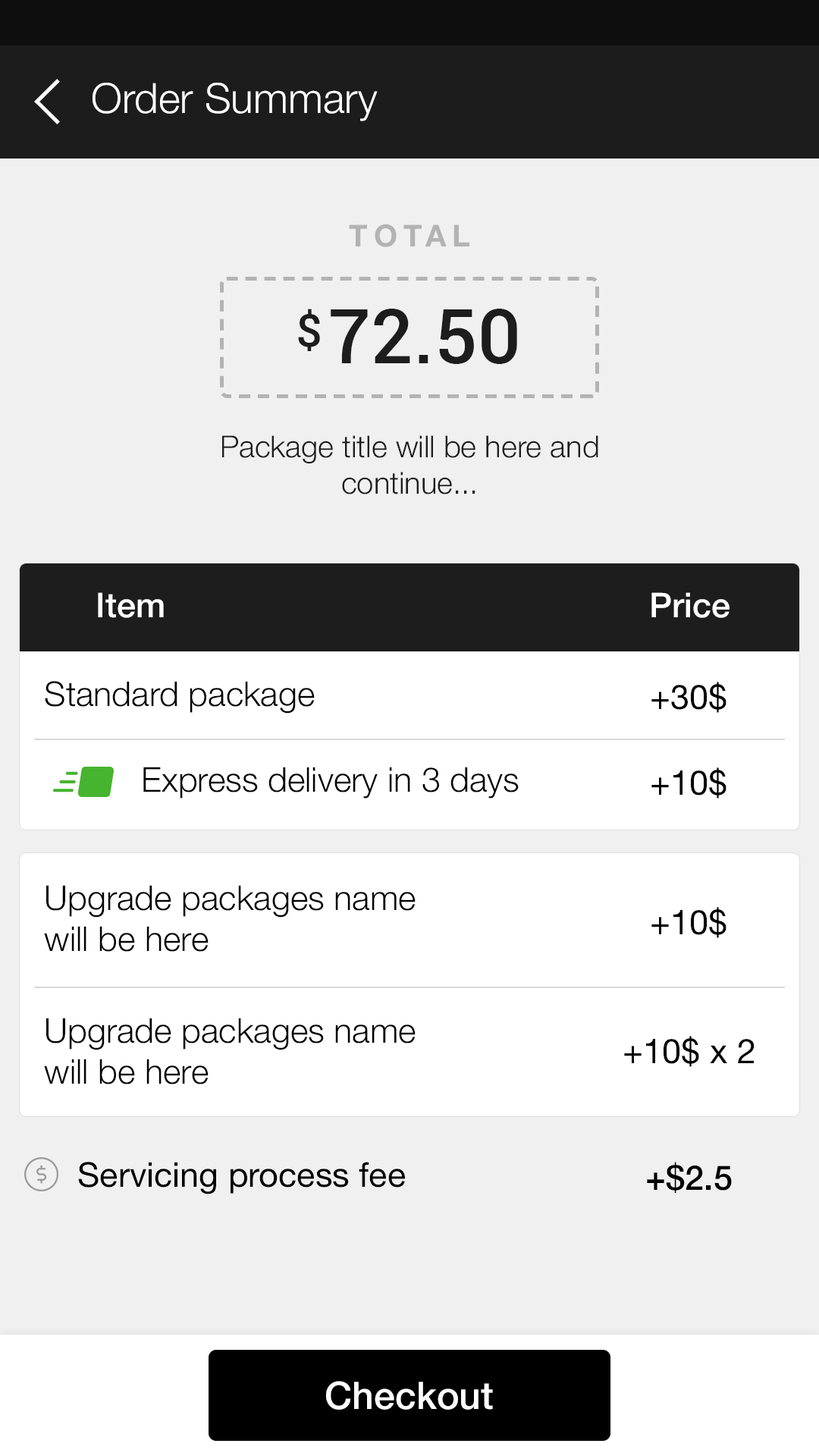
<style>
.page{position:relative;width:819px;height:1456px;background:#f0f0f0}
.page>*{position:absolute;margin:0}
.t1{font:41.7px "HelveticaNeue-Light";color:#ffffff}
.t2{font:30.3px "HelveticaNeue-Bold";letter-spacing:0.2em;color:#b3b3b3}
.t3{font:45.5px "Roboto-Medium";color:#1d1d1d}
.t4{font:75.8px "Roboto-Medium";color:#1d1d1d}
.t5{font:30.3px "HelveticaNeue-Light";color:#1d1d1d}
.t6{font:34.1px "HelveticaNeue-Medium";color:#ffffff}
.t7{font:34.1px "HelveticaNeue-Light";color:#000000}
.t8{font:34.1px "HelveticaNeue";color:#000000}
.t9{font:34.1px "HelveticaNeue-Medium";color:#000000}
.t10{font:37.9px "HelveticaNeue-Medium";color:#ffffff}
</style>
<div class="page">
<p class="t1" style="left:92px;top:83px;width:286px;height:38px">Order Summary</p>
<p class="t2" style="left:349px;top:224px;width:120px;height:23px">TOTAL</p>
<p class="t3" style="left:298px;top:309px;width:22px;height:42px">$</p>
<p class="t4" style="left:331px;top:309px;width:186px;height:55px">72.50</p>
<p class="t5" style="left:222px;top:435px;width:376px;height:59px;text-align:center">Package title will be here and<br>continue...</p>
<p class="t6" style="left:98px;top:592px;width:66px;height:26px">Item</p>
<p class="t6" style="left:651px;top:592px;width:79px;height:26px">Price</p>
<p class="t7" style="left:45px;top:681px;width:270px;height:33px">Standard package</p>
<p class="t8" style="left:651px;top:682px;width:75px;height:31px">+30$</p>
<p class="t7" style="left:143px;top:767px;width:376px;height:32px">Express delivery in 3 days</p>
<p class="t8" style="left:651px;top:767px;width:75px;height:32px">+10$</p>
<p class="t7" style="left:44px;top:885px;width:372px;height:67px">Upgrade packages name<br>will be here</p>
<p class="t8" style="left:651px;top:907px;width:75px;height:31px">+10$</p>
<p class="t7" style="left:44px;top:1018px;width:372px;height:66px">Upgrade packages name<br>will be here</p>
<p class="t8" style="left:624px;top:1036px;width:131px;height:31px">+10$ x 2</p>
<p class="t8" style="left:78px;top:1162px;width:327px;height:32px">Servicing process fee</p>
<p class="t9" style="left:647px;top:1162px;width:85px;height:32px">+$2.5</p>
<p class="t10" style="left:326px;top:1381px;width:167px;height:29px">Checkout</p>
</div>
